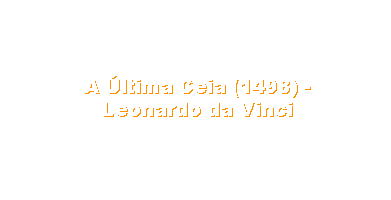
<style>
.page{position:relative;width:391px;height:200px;background:#ffffff}
.page>*{position:absolute;margin:0}
.t1{font:19px "Arial-Black";color:#ffffff}
</style>
<div class="page">
<p class="t1" style="left:85px;top:76px;width:226px;height:41px;text-align:center">A Última Ceia (1498) - Leonardo da Vinci</p>
</div>
